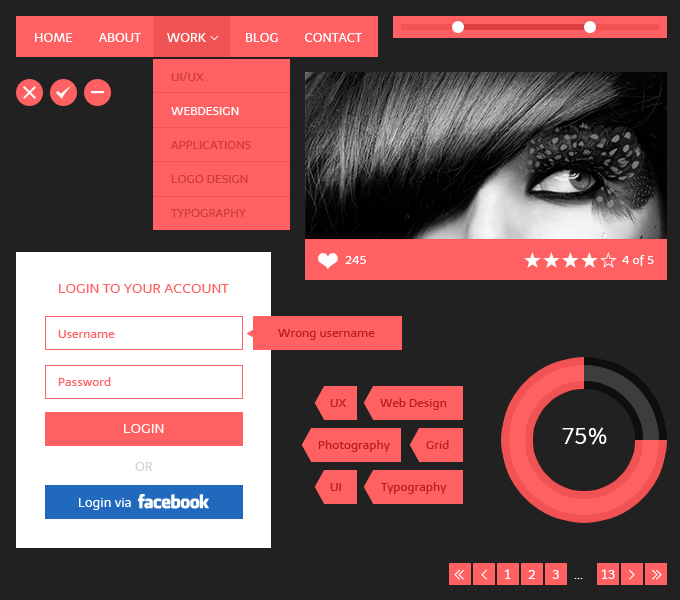
<style>
.page{position:relative;width:680px;height:600px;background:#212121}
.page>*{position:absolute;margin:0}
.t1{font:13px "Telex-Regular";color:#ffffff;text-transform:uppercase}
.t2{font:12px/34px "Telex-Regular";color:#cf3c3d;text-transform:uppercase}
.t3{font:12px/34px "Telex-Regular";color:#ffffff;text-transform:uppercase}
.t4{font:12px "Telex-Regular";color:#ffffff}
.t5{font:14px "Telex-Regular";color:#ff6162;text-transform:uppercase}
.t6{font:12px "Telex-Regular";color:#b71f20}
.t7{font:12px "Telex-Regular";color:#ff6162}
.t8{font:12px "Telex-Regular";color:#b71f20;text-transform:uppercase}
.t9{font:14px "Telex-Regular";color:#ffffff;text-transform:uppercase}
.t10{font:23px "Telex-Regular";color:#ffffff;text-transform:uppercase}
.t11{font:13px "Telex-Regular";color:#d4d4d4;text-transform:uppercase}
.t12{font:13px "Telex-Regular";color:#ffffff}
</style>
<div class="page">
<p class="t1" style="left:35px;top:33px;width:327px;height:9px">Home        About        Work            blog        Contact</p>
<p class="t2" style="left:170px;top:72px;width:81px;height:145px">ui/ux<br><span class="t3">webdesign<br></span>applications<br>logo design<br>typography</p>
<p class="t4" style="left:345px;top:256px;width:21px;height:8px">245</p>
<p class="t4" style="left:622px;top:255px;width:32px;height:11px">4 of 5</p>
<p class="t5" style="left:59px;top:284px;width:170px;height:9px">login to your account</p>
<p class="t6" style="left:278px;top:329px;width:97px;height:11px">Wrong username</p>
<p class="t7" style="left:58px;top:330px;width:57px;height:8px">Username</p>
<p class="t7" style="left:58px;top:377px;width:53px;height:9px">Password</p>
<p class="t8" style="left:330px;top:399px;width:17px;height:8px">ux</p>
<p class="t6" style="left:380px;top:398px;width:67px;height:12px">Web Design</p>
<p class="t9" style="left:124px;top:424px;width:40px;height:9px">login</p>
<p class="t10" style="left:562px;top:427px;width:45px;height:18px">75%</p>
<p class="t6" style="left:318px;top:440px;width:72px;height:12px">Photography</p>
<p class="t6" style="left:426px;top:440px;width:23px;height:9px">Grid</p>
<p class="t11" style="left:135px;top:462px;width:18px;height:9px">or</p>
<p class="t8" style="left:330px;top:483px;width:11px;height:8px">ui</p>
<p class="t6" style="left:380px;top:482px;width:67px;height:12px">Typography</p>
<p class="t12" style="left:79px;top:498px;width:52px;height:12px">Login via</p>
<p class="t12" style="left:504px;top:569px;width:7px;height:10px">1</p>
<p class="t12" style="left:601px;top:569px;width:14px;height:10px">13</p>
<p class="t12" style="left:528px;top:570px;width:7px;height:9px">2</p>
<p class="t12" style="left:552px;top:570px;width:7px;height:9px">3</p>
<p class="t12" style="left:574px;top:578px;width:9px;height:1px">...</p>
</div>
